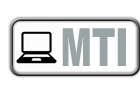
<style>
.page{position:relative;width:140px;height:89px;background:#ffffff}
.page>*{position:absolute;margin:0}
.t1{font:54px "SegoeUIBlack";color:#99a5a5;scale:0.59 1}
.t2{font:54px "SegoeUIBlack";color:#99a5a5;scale:0.68 1}
.t3{font:54px "SegoeUIBlack";color:#99a5a5;scale:0.72 1}
</style>
<div class="page">
<p class="t1" style="left:62px;top:28px;width:64px;height:38px">M<span class="t2">T</span><span class="t3">I</span></p>
</div>
